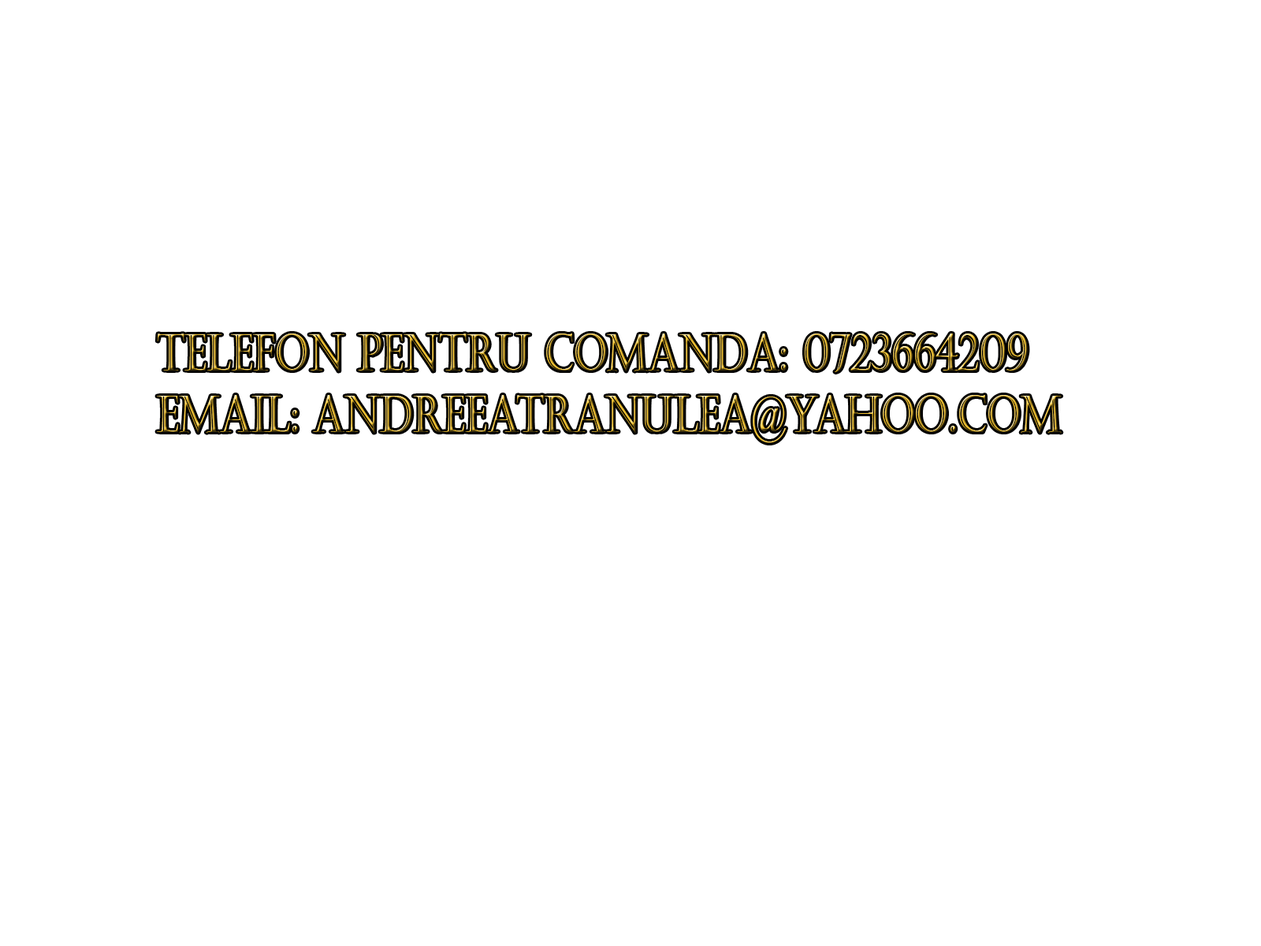
<style>
.page{position:relative;width:1261px;height:946px;background:#ffffff}
.page>*{position:absolute;margin:0}
.t1{font:51.3px "Castellar";scale:0.75 1}
</style>
<div class="page">
<p class="t1" style="left:157px;top:333px;width:905px;height:110px">Telefon pentru comanda: 0723664209<br>Email: andreeatranulea@yahoo.com</p>
</div>
